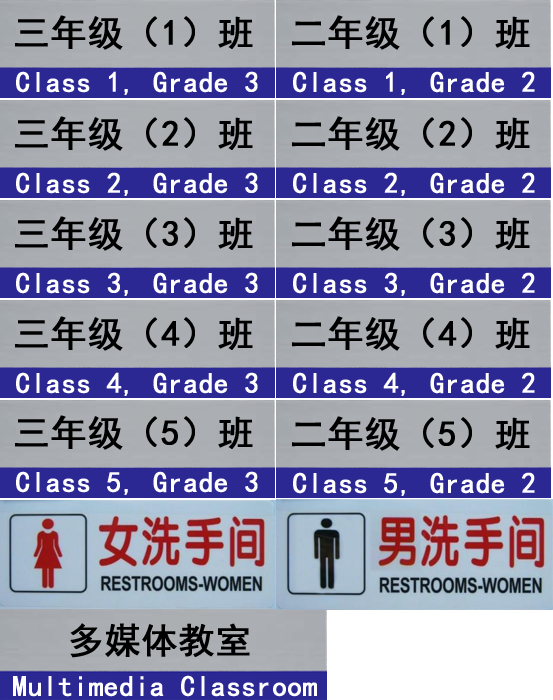
<style>
.page{position:relative;width:553px;height:700px}
.page>*{position:absolute;margin:0}
.t1{font:36px "SimHei";color:#000000;font-weight:bold}
.t2{font:29px "SimHei";color:#ffffff;font-weight:bold}
</style>
<div class="page">
<p class="t1" style="left:15px;top:15px;width:238px;height:35px">三年级（1）班</p>
<p class="t1" style="left:292px;top:15px;width:238px;height:35px">二年级（1）班</p>
<p class="t2" style="left:16px;top:71px;width:242px;height:24px">Class 1, Grade 3</p>
<p class="t2" style="left:293px;top:71px;width:242px;height:24px">Class 1, Grade 2</p>
<p class="t1" style="left:15px;top:116px;width:238px;height:35px">三年级（2）班</p>
<p class="t1" style="left:292px;top:116px;width:238px;height:35px">二年级（2）班</p>
<p class="t2" style="left:16px;top:172px;width:242px;height:24px">Class 2, Grade 3</p>
<p class="t2" style="left:293px;top:172px;width:242px;height:24px">Class 2, Grade 2</p>
<p class="t1" style="left:15px;top:216px;width:238px;height:35px">三年级（3）班</p>
<p class="t1" style="left:292px;top:216px;width:238px;height:35px">二年级（3）班</p>
<p class="t2" style="left:16px;top:272px;width:242px;height:24px">Class 3, Grade 3</p>
<p class="t2" style="left:293px;top:272px;width:242px;height:24px">Class 3, Grade 2</p>
<p class="t1" style="left:15px;top:316px;width:238px;height:35px">三年级（4）班</p>
<p class="t1" style="left:292px;top:316px;width:238px;height:35px">二年级（4）班</p>
<p class="t2" style="left:16px;top:372px;width:242px;height:24px">Class 4, Grade 3</p>
<p class="t2" style="left:293px;top:372px;width:242px;height:24px">Class 4, Grade 2</p>
<p class="t1" style="left:15px;top:415px;width:238px;height:35px">三年级（5）班</p>
<p class="t1" style="left:292px;top:416px;width:238px;height:35px">二年级（5）班</p>
<p class="t2" style="left:16px;top:471px;width:242px;height:24px">Class 5, Grade 3</p>
<p class="t2" style="left:293px;top:472px;width:242px;height:24px">Class 5, Grade 2</p>
<p class="t1" style="left:70px;top:623px;width:180px;height:35px">多媒体教室</p>
<p class="t2" style="left:13px;top:675px;width:304px;height:22px">Multimedia Classroom</p>
</div>
